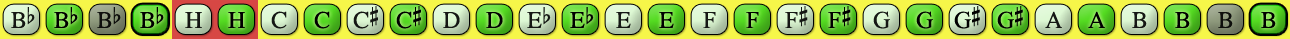
<style>
.page{position:relative;width:1290px;height:39px}
.page>*{position:absolute;margin:0}
.t1{font:24px "OpusChords";color:#000000}
.t2{font:24px "OpusChords";letter-spacing:-0.025em;color:#000000}
</style>
<div class="page">
<p class="t1" style="left:353px;top:6px;width:25px;height:23px;opacity:0.9">C#</p>
<p class="t1" style="left:396px;top:6px;width:25px;height:23px">C#</p>
<p class="t1" style="left:785px;top:6px;width:23px;height:22px;opacity:0.9">F#</p>
<p class="t1" style="left:828px;top:6px;width:23px;height:22px">F#</p>
<p class="t2" style="left:954px;top:6px;width:26px;height:23px">G#</p>
<p class="t2" style="left:997px;top:6px;width:26px;height:23px">G#</p>
<p class="t1" style="left:11px;top:7px;width:24px;height:21px;opacity:0.9">Bb</p>
<p class="t1" style="left:54px;top:7px;width:24px;height:21px">Bb</p>
<p class="t1" style="left:97px;top:7px;width:24px;height:21px;opacity:0.9">Bb</p>
<p class="t1" style="left:140px;top:7px;width:24px;height:21px">Bb</p>
<p class="t1" style="left:185px;top:12px;width:17px;height:16px;opacity:0.9">H</p>
<p class="t1" style="left:228px;top:12px;width:17px;height:16px">H</p>
<p class="t1" style="left:271px;top:11px;width:16px;height:18px;opacity:0.9">C</p>
<p class="t1" style="left:314px;top:11px;width:16px;height:18px">C</p>
<p class="t1" style="left:443px;top:12px;width:17px;height:16px;opacity:0.9">D</p>
<p class="t1" style="left:486px;top:12px;width:17px;height:16px">D</p>
<p class="t1" style="left:527px;top:7px;width:24px;height:21px;opacity:0.9">Eb</p>
<p class="t1" style="left:570px;top:7px;width:24px;height:21px">Eb</p>
<p class="t1" style="left:616px;top:12px;width:15px;height:16px;opacity:0.9">E</p>
<p class="t1" style="left:659px;top:12px;width:15px;height:16px">E</p>
<p class="t1" style="left:703px;top:12px;width:13px;height:16px;opacity:0.9">F</p>
<p class="t1" style="left:746px;top:12px;width:13px;height:16px">F</p>
<p class="t1" style="left:873px;top:11px;width:17px;height:18px;opacity:0.9">G</p>
<p class="t1" style="left:916px;top:11px;width:17px;height:18px">G</p>
<p class="t1" style="left:1045px;top:11px;width:17px;height:17px;opacity:0.9">A</p>
<p class="t1" style="left:1088px;top:11px;width:17px;height:17px">A</p>
<p class="t1" style="left:1132px;top:12px;width:15px;height:16px;opacity:0.9">B</p>
<p class="t1" style="left:1175px;top:12px;width:15px;height:16px">B</p>
<p class="t1" style="left:1218px;top:12px;width:15px;height:16px;opacity:0.9">B</p>
<p class="t1" style="left:1261px;top:12px;width:15px;height:16px">B</p>
</div>
